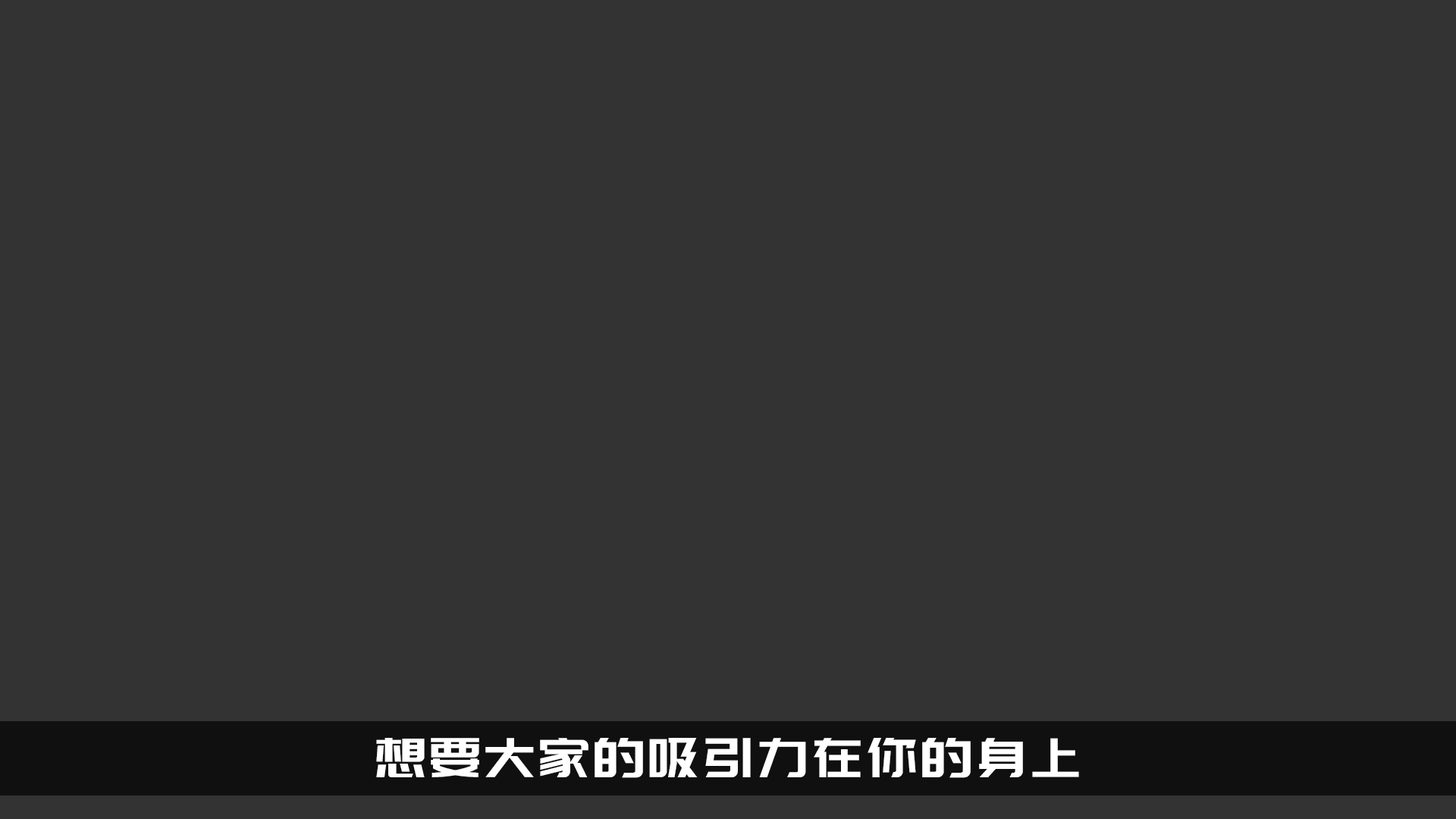
<style>
.page{position:relative;width:1456px;height:819px;background:#333333}
.page>*{position:absolute;margin:0}
.t1{font:54.6px "PangMenZhengDao-3";color:#ffffff}
</style>
<div class="page">
<p class="t1" style="left:376px;top:738px;width:703px;height:40px">想要大家的吸引力在你的身上</p>
</div>
